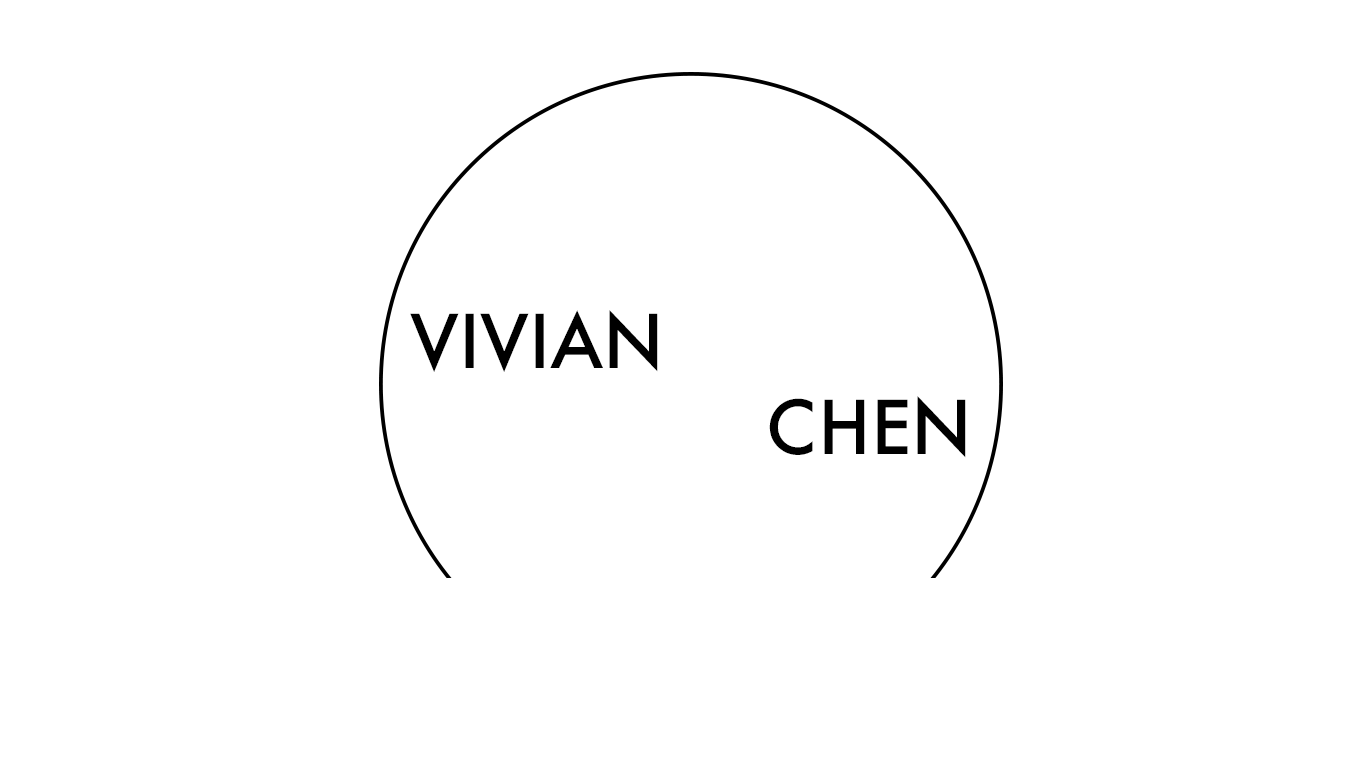
<style>
.page{position:relative;width:1366px;height:768px;background:#ffffff}
.page>*{position:absolute;margin:0}
.t1{font:72px "Futura-Medium";color:#000000}
</style>
<div class="page">
<p class="t1" style="left:410px;top:310px;width:556px;height:148px">VIVIAN<br>CHEN</p>
</div>
